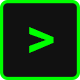
<style>
.page{position:relative;width:80px;height:80px;background:#111111}
.page>*{position:absolute;margin:0}
.t1{font:48px "Arial-BoldMT";color:#00ff00}
</style>
<div class="page">
<p class="t1" style="left:29px;top:27px;width:25px;height:26px">&gt;</p>
</div>
